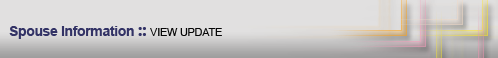
<style>
.page{position:relative;width:498px;height:58px;background:#e1e0e0}
.page>*{position:absolute;margin:0}
.t1{font:14px "Arial-BoldMT";letter-spacing:-0.025em;color:#333366}
.t2{font:18px "SegoeUI-Bold";letter-spacing:-0.025em;color:#333366}
.t3{font:11px "ArialMT";letter-spacing:-0.025em;color:#070707}
</style>
<div class="page">
<p class="t1" style="left:9px;top:26px;width:213px;height:13px">Spouse Information <span class="t2">:: </span><span class="t3">VIEW UPDATE</span></p>
</div>
